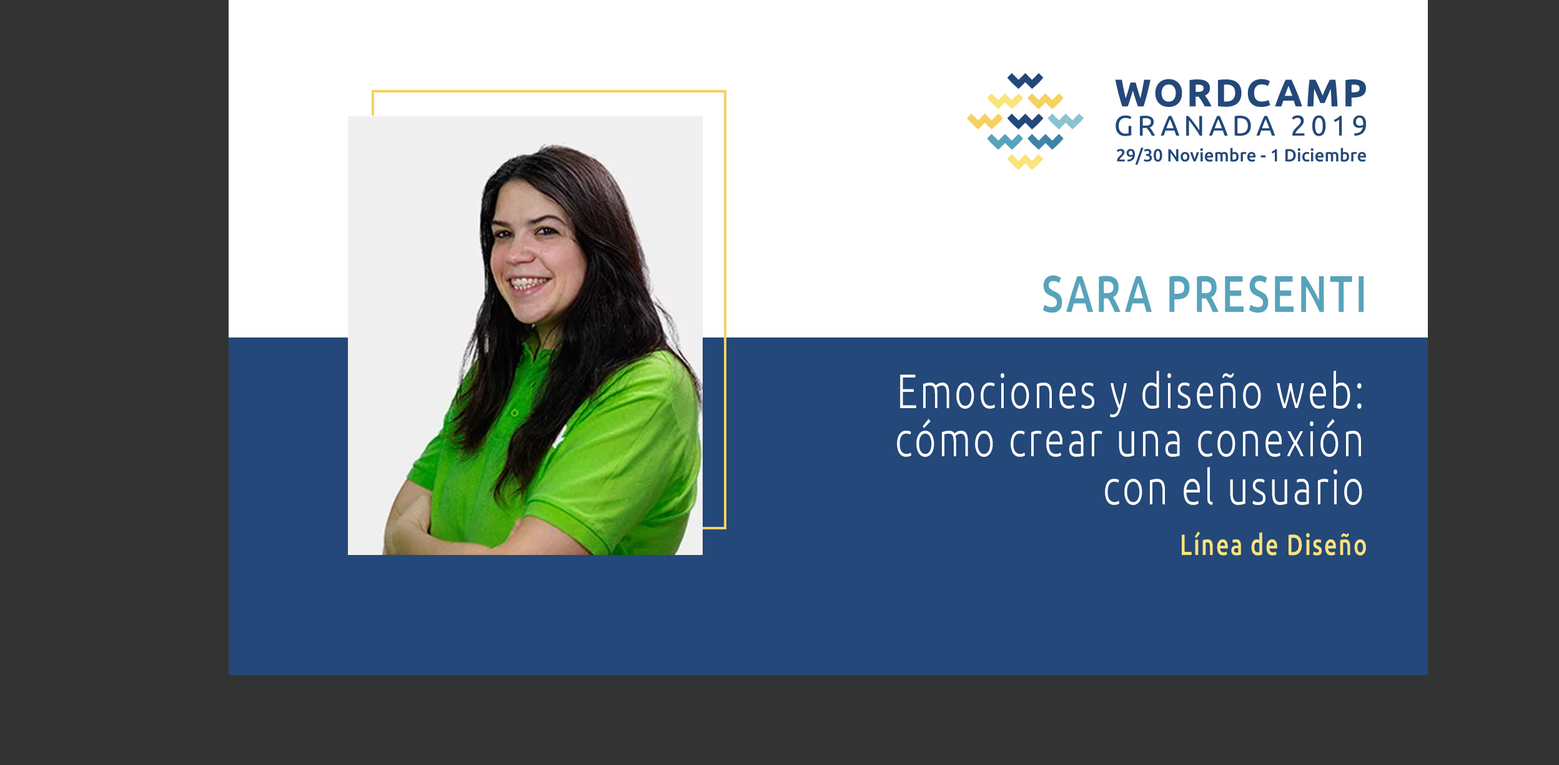
<style>
.page{position:relative;width:1559px;height:765px;background:#333333}
.page>*{position:absolute;margin:0}
.t1{font:51.4px "Ubuntu-Medium";letter-spacing:0.068em;color:#57a3bb;text-transform:uppercase;scale:0.77 1}
.t2{font:48.2px/48.2px "Ubuntu-Light";letter-spacing:0.068em;color:#ffffff;scale:0.77 1}
.t3{font:29.2px "Ubuntu-Medium";letter-spacing:0.068em;color:#f9e37b;scale:0.77 1}
</style>
<div class="page">
<p class="t1" style="left:1043px;top:275px;width:321px;height:38px">Sara Presenti</p>
<p class="t2" style="left:897px;top:370px;width:466px;height:135px;text-align:right">Emociones y diseño web: cómo crear una conexión con el usuario</p>
<p class="t3" style="left:1182px;top:531px;width:184px;height:24px">Línea de Diseño</p>
</div>
